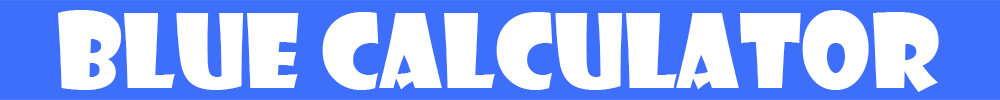
<style>
.page{position:relative;width:1000px;height:100px;background:#3d6ffb}
.page>*{position:absolute;margin:0}
.t1{font:100px "ShowcardGothic-Reg";color:#ffffff}
</style>
<div class="page">
<p class="t1" style="left:58px;top:10px;width:881px;height:82px">Blue Calculator</p>
</div>
